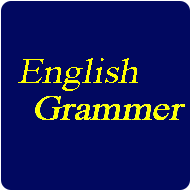
<style>
.page{position:relative;width:192px;height:192px;background:#010860}
.page>*{position:absolute;margin:0}
.t1{font:36px "TimesNewRomanPSMT";color:#ffff00;font-style:italic;scale:1.09 1}
</style>
<div class="page">
<p class="t1" style="left:18px;top:58px;width:120px;height:33px">English</p>
<p class="t1" style="left:35px;top:96px;width:150px;height:24px">Grammer</p>
</div>
